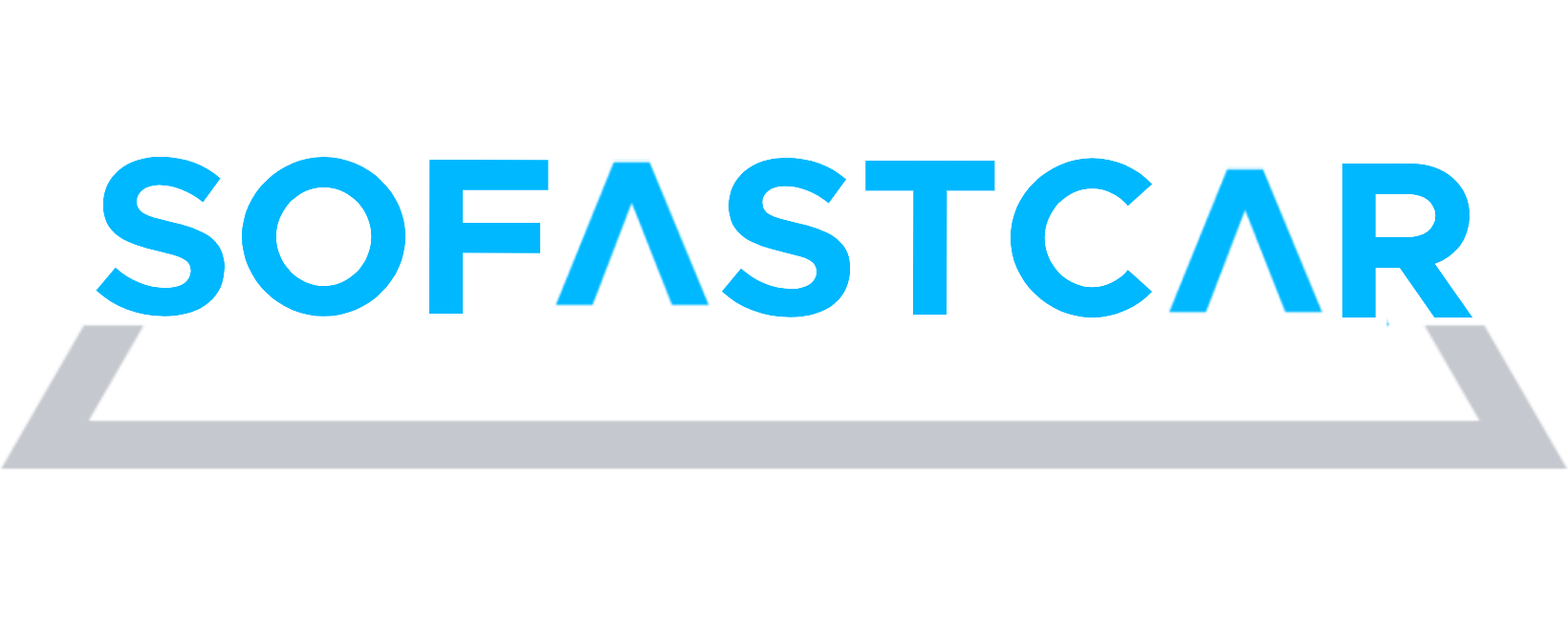
<style>
.page{position:relative;width:1568px;height:635px;background:#ffffff}
.page>*{position:absolute;margin:0}
.t1{font:223.6px "Metropolis-Bold";color:#00b8ff}
</style>
<div class="page">
<p class="t1" style="left:96px;top:157px;width:453px;height:159px">SOF</p>
<p class="t1" style="left:722px;top:158px;width:430px;height:159px">STC</p>
<p class="t1" style="left:1342px;top:163px;width:130px;height:154px">R</p>
</div>
